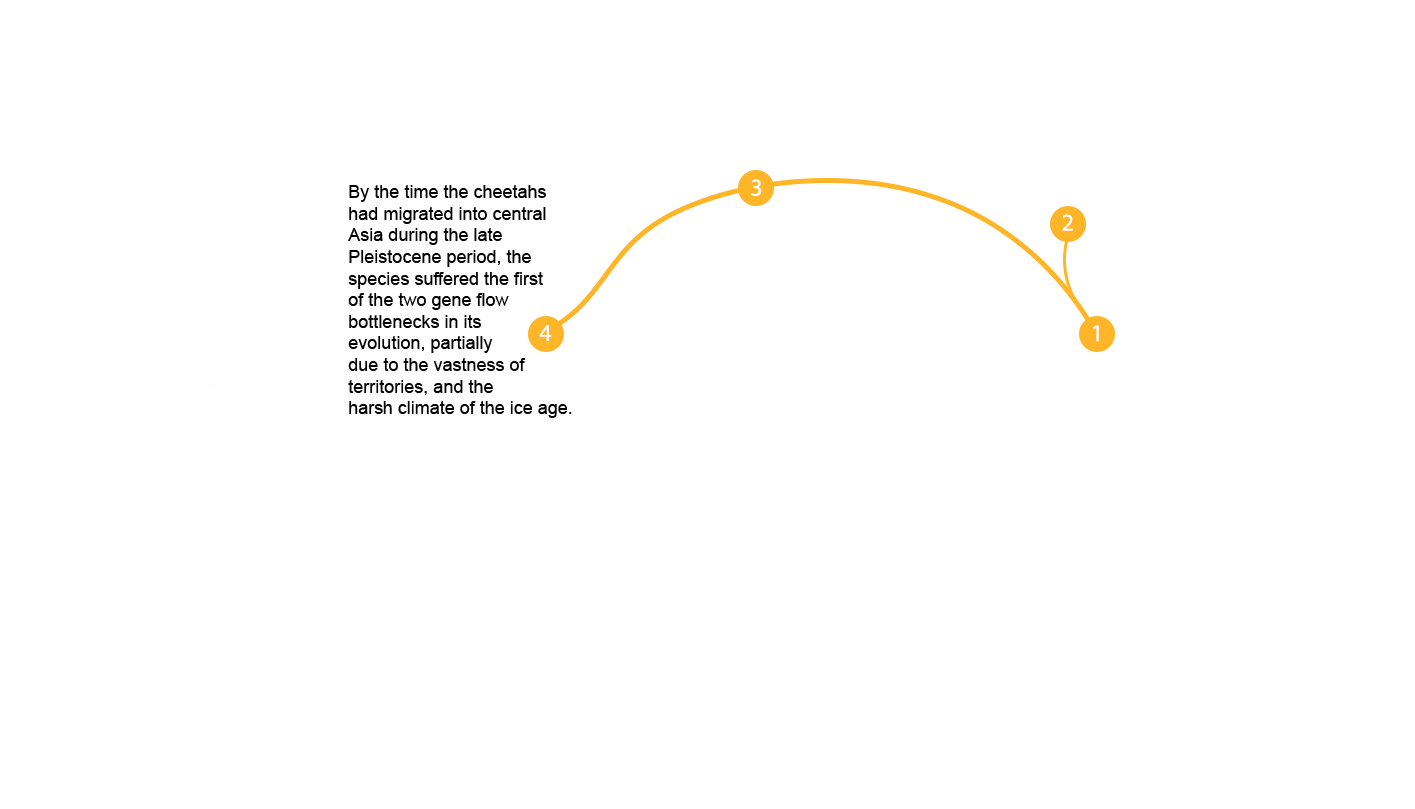
<style>
.page{position:relative;width:1415px;height:809px;background:#ffffff}
.page>*{position:absolute;margin:0}
.t1{font:18px "ArialMT";color:#000000}
</style>
<div class="page">
<p class="t1" style="left:348px;top:185px;width:224px;height:233px">By the time the cheetahs<br>had migrated into central<br>Asia during the late<br>Pleistocene period, the<br>species suffered the first<br>of the two gene flow<br>bottlenecks in its<br>evolution, partially<br>due to the vastness of<br>territories, and the<br>harsh climate of the ice age.</p>
</div>
